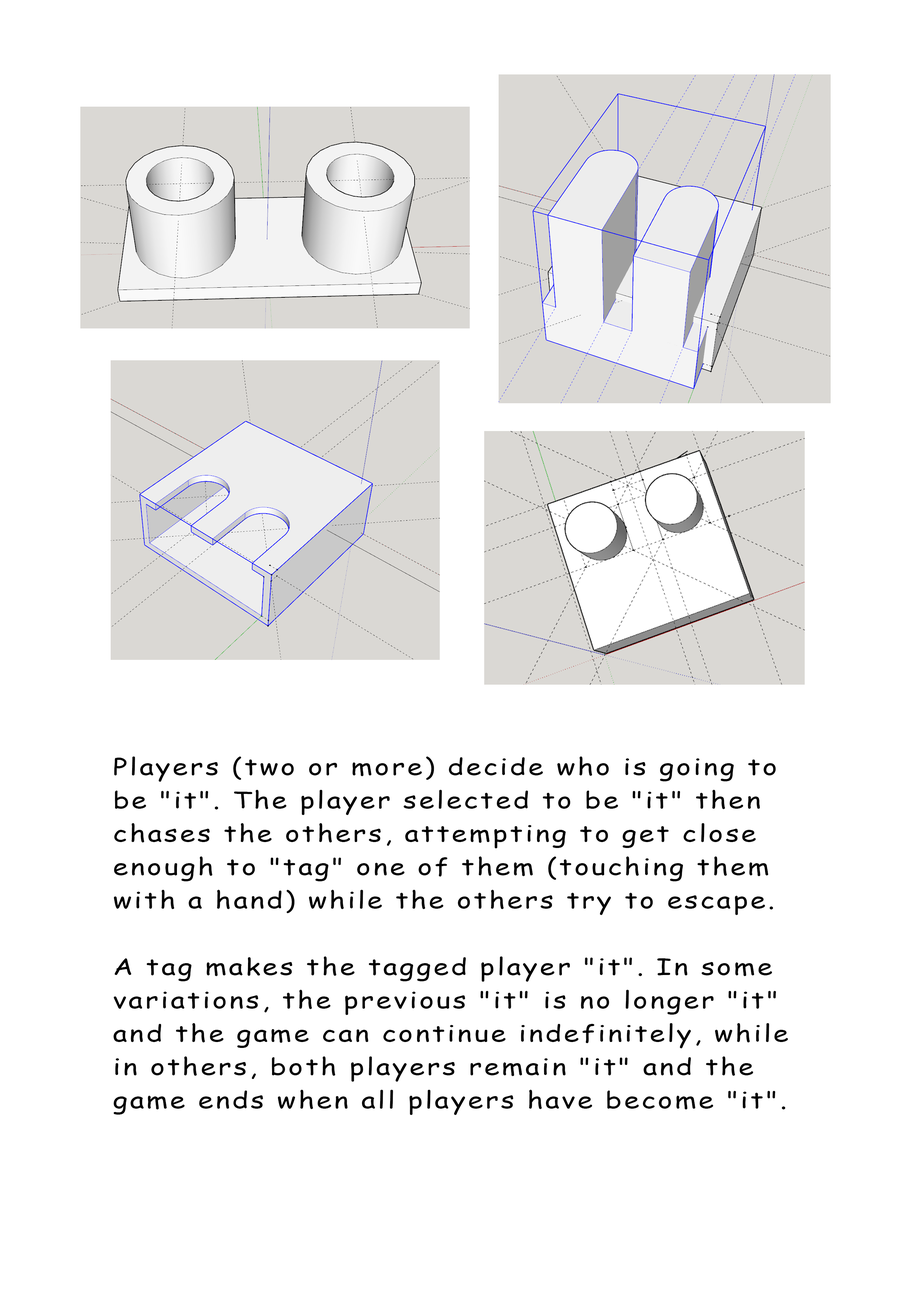
<style>
.page{position:relative;width:918px;height:1299px;background:#ffffff}
.page>*{position:absolute;margin:0}
.t1{font:23px "ComicSansMS";letter-spacing:0.08em;color:#000000;scale:1.2 1}
</style>
<div class="page">
<p class="t1" style="left:113px;top:756px;width:675px;height:359px">Players (two or more) decide who is going to be "it". The player selected to be "it" then chases the others, attempting to get close enough to "tag" one of them (touching them with a hand) while the others try to escape. <br><br>A tag makes the tagged player "it". In some variations, the previous "it" is no longer "it" and the game can continue indefinitely, while in others, both players remain "it" and the game ends when all players have become "it".</p>
</div>
